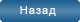
<style>
.page{position:relative;width:80px;height:22px}
.page>*{position:absolute;margin:0}
.t1{font:11px "ArialMT";letter-spacing:0.099em;color:#ffffff}
</style>
<div class="page">
<p class="t1" style="left:20px;top:6px;width:36px;height:10px">Назад</p>
</div>
